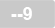
<style>
.page{position:relative;width:55px;height:28px;background:#c9c9c9}
.page>*{position:absolute;margin:0}
.t1{font:18.2px "Arial-BoldMT";color:#ffffff}
</style>
<div class="page">
<p class="t1" style="left:11px;top:7px;width:21px;height:13px">--9</p>
</div>
